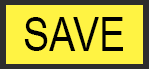
<style>
.page{position:relative;width:149px;height:69px;background:#fff343}
.page>*{position:absolute;margin:0}
.t1{font:48px "ArialNarrow";color:#000000}
</style>
<div class="page">
<p class="t1" style="left:24px;top:17px;width:99px;height:34px">SAVE</p>
</div>
